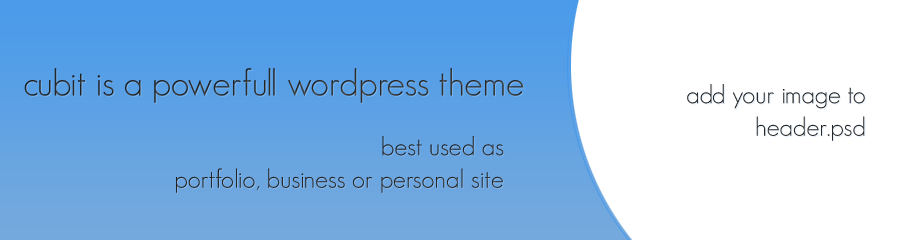
<style>
.page{position:relative;width:900px;height:240px;background:#ffffff}
.page>*{position:absolute;margin:0}
.t1{font:36.8px "GeosansLight";color:#2b2c2d}
.t2{font:26.1px/32.6px "GeosansLight";color:#272728}
.t3{font:26.1px/32.6px "GeosansLight";color:#252626}
</style>
<div class="page">
<p class="t1" style="left:24px;top:68px;width:500px;height:35px">cubit is a powerfull wordpress theme</p>
<p class="t2" style="left:687px;top:84px;width:178px;height:57px;text-align:right">add your image to<br>header.psd</p>
<p class="t3" style="left:176px;top:136px;width:328px;height:57px;text-align:right">best used as<br>portfolio, business or personal site</p>
</div>
